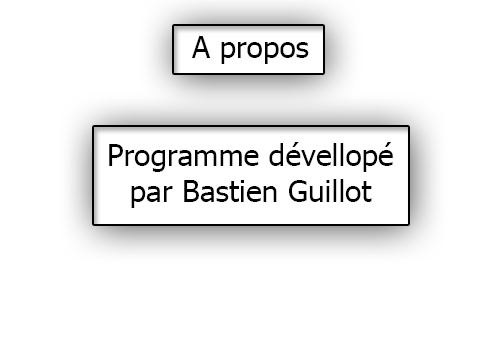
<style>
.page{position:relative;width:500px;height:350px;background:#ffffff}
.page>*{position:absolute;margin:0}
.t1{font:30px "Tahoma";color:#000000}
</style>
<div class="page">
<p class="t1" style="left:109px;top:36px;width:284px;height:172px;text-align:center">A propos<br><br><br>Programme dévellopé<br>par Bastien Guillot</p>
</div>
